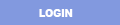
<style>
.page{position:relative;width:120px;height:25px;background:#8299df}
.page>*{position:absolute;margin:0}
.t1{font:18.2px "Arial-Black";color:#ffffff;scale:0.9 1}
</style>
<div class="page">
<p class="t1" style="left:39px;top:9px;width:34px;height:8px">LOGIN</p>
</div>
